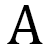
<style>
.page{position:relative;width:50px;height:50px;background:#ffffff}
.page>*{position:absolute;margin:0}
.t1{font:58.3px "CambriaMath";color:#000000}
</style>
<div class="page">
<p class="t1" style="left:7px;top:5px;width:36px;height:39px">A</p>
</div>
